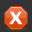
<style>
.page{position:relative;width:32px;height:32px;background:#333333}
.page>*{position:absolute;margin:0}
.t1{font:19px "Arial-Black";text-transform:uppercase}
</style>
<div class="page">
<p class="t1" style="left:8px;top:10px;width:15px;height:15px">X</p>
</div>
